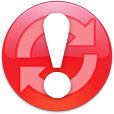
<style>
.page{position:relative;width:114px;height:114px;background:#ffffff}
.page>*{position:absolute;margin:0}
.t1{font:110px "Braggadocio";color:#ffffff}
</style>
<div class="page">
<p class="t1" style="left:43px;top:13px;width:28px;height:85px">!</p>
</div>
